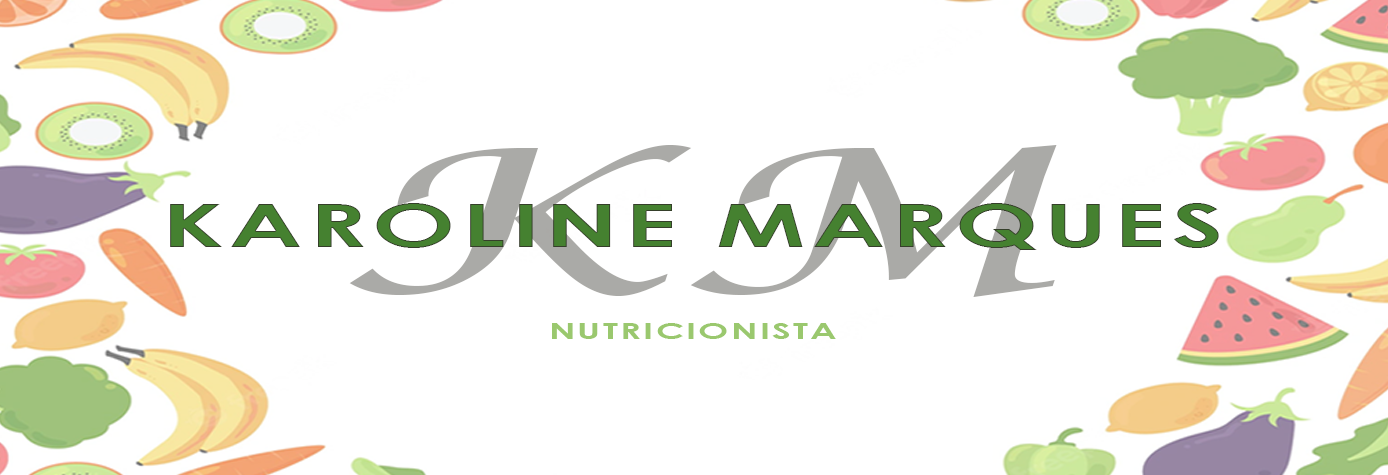
<style>
.page{position:relative;width:1388px;height:475px;background:#ffffff}
.page>*{position:absolute;margin:0}
.t1{font:199.7px "LucidaCalligraphy-Italic";color:#aaaaa7;scale:1.64 1}
.t2{font:60.5px "CenturyGothic-Bold";letter-spacing:0.06em;color:#458130;scale:1.64 1}
.t3{font:22px "CenturyGothic-Bold";letter-spacing:0.06em;color:#9ac86e;scale:1.64 1}
</style>
<div class="page">
<p class="t1" style="left:349px;top:145px;width:343px;height:151px">K</p>
<p class="t1" style="left:690px;top:145px;width:367px;height:152px">M</p>
<p class="t2" style="left:170px;top:203px;width:1049px;height:47px">KAROLINE MARQUES</p>
<p class="t3" style="left:552px;top:323px;width:284px;height:16px">NUTRICIONISTA</p>
</div>
